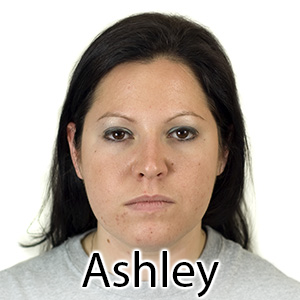
<style>
.page{position:relative;width:300px;height:300px;background:#ffffff}
.page>*{position:absolute;margin:0}
.t1{font:50px "MyriadPro-Regular";color:#000000}
</style>
<div class="page">
<p class="t1" style="left:82px;top:251px;width:137px;height:47px">Ashley</p>
</div>
